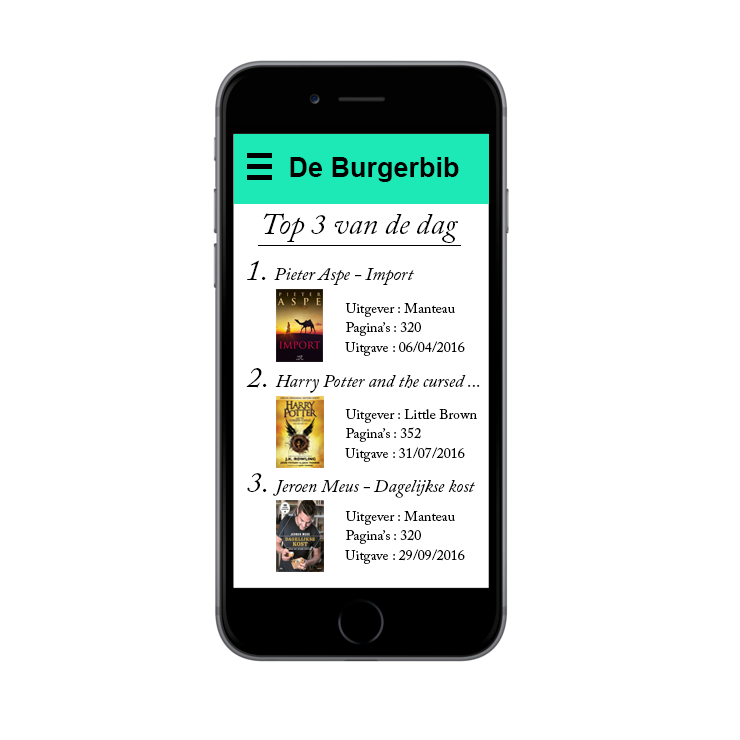
<style>
.page{position:relative;width:740px;height:740px;background:#ffffff}
.page>*{position:absolute;margin:0}
.t1{font:27px "Arial-BoldMT";color:#000000}
.t2{font:30px "ACaslonPro-Italic";color:#000000}
.t3{font:18px "ACaslonPro-Italic";color:#000000}
.t4{font:14px "ACaslonPro-Regular";color:#000000}
</style>
<div class="page">
<p class="t1" style="left:290px;top:157px;width:169px;height:25px">De Burgerbib</p>
<p class="t2" style="left:263px;top:213px;width:195px;height:30px">Top 3 van de dag</p>
<p class="t3" style="left:247px;top:260px;width:167px;height:25px"><span class="t2">1. </span>Pieter Aspe - Import</p>
<p class="t4" style="left:345px;top:303px;width:110px;height:14px">Uitgever : Manteau</p>
<p class="t4" style="left:346px;top:322px;width:75px;height:14px">Pagina’s : 320</p>
<p class="t4" style="left:345px;top:341px;width:120px;height:15px">Uitgave : 06/04/2016</p>
<p class="t3" style="left:246px;top:368px;width:234px;height:25px"><span class="t2">2. </span>Harry Potter and the cursed ...</p>
<p class="t4" style="left:345px;top:409px;width:132px;height:14px">Uitgever : Little Brown</p>
<p class="t4" style="left:346px;top:427px;width:75px;height:15px">Pagina’s : 352</p>
<p class="t4" style="left:345px;top:447px;width:120px;height:15px">Uitgave : 31/07/2016</p>
<p class="t3" style="left:247px;top:473px;width:228px;height:25px"><span class="t2">3. </span>Jeroen Meus - Dagelijkse kost</p>
<p class="t4" style="left:345px;top:511px;width:110px;height:14px">Uitgever : Manteau</p>
<p class="t4" style="left:346px;top:530px;width:75px;height:14px">Pagina’s : 320</p>
<p class="t4" style="left:345px;top:549px;width:120px;height:15px">Uitgave : 29/09/2016</p>
</div>
